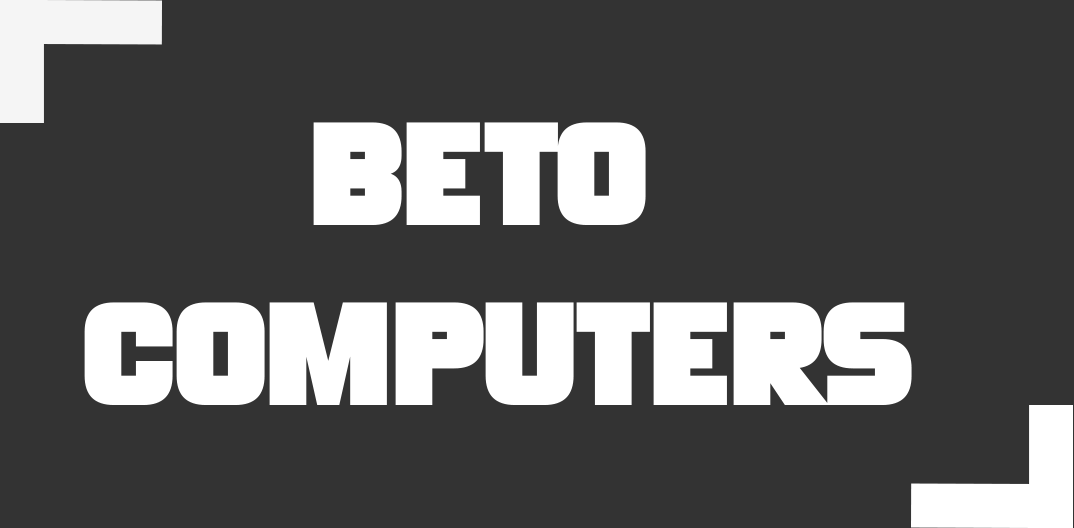
<style>
.page{position:relative;width:1074px;height:528px;background:#333333}
.page>*{position:absolute;margin:0}
.t1{font:150px "MonsterBites";letter-spacing:-0.025em;color:#ffffff}
</style>
<div class="page">
<p class="t1" style="left:84px;top:122px;width:828px;height:283px;text-align:center">BETO <br>COMPUTERS</p>
</div>
